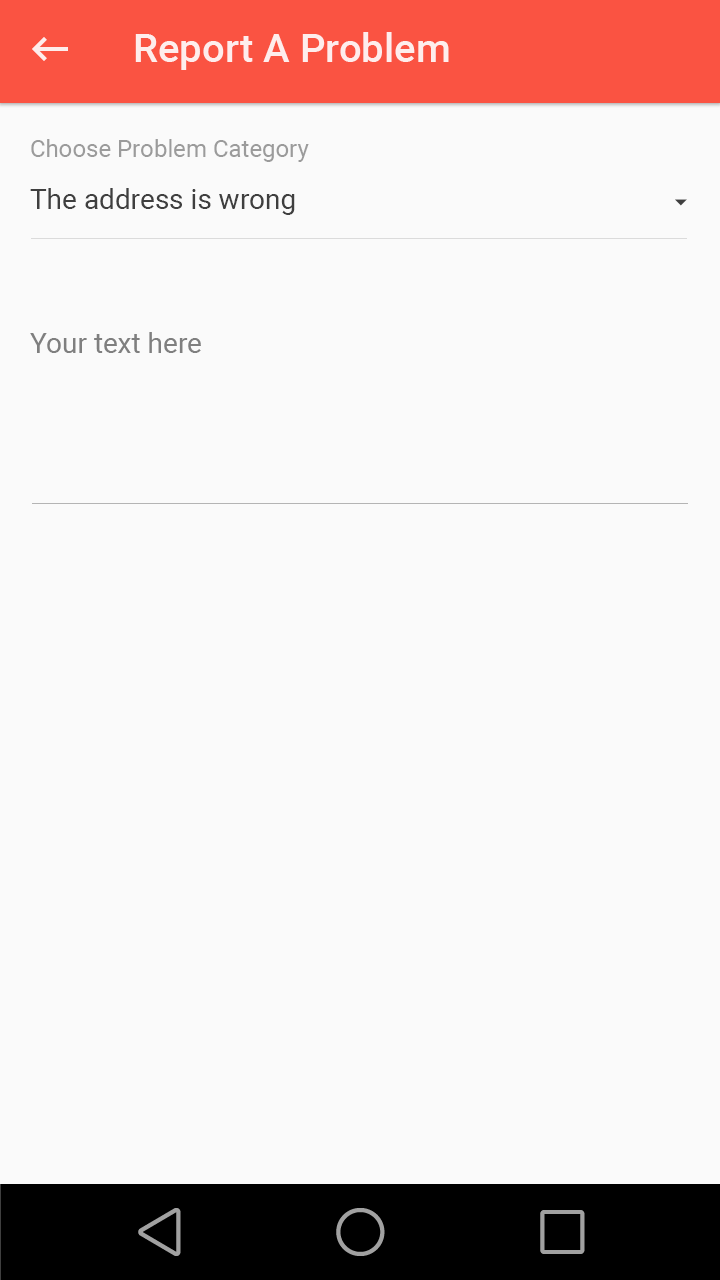
<style>
.page{position:relative;width:720px;height:1280px;background:#fafafa}
.page>*{position:absolute;margin:0}
.t1{font:40px "Roboto-Medium";color:#ffffff}
.t2{font:24px "Roboto-Regular";color:#9b9b9b}
.t3{font:28px "Roboto-Regular";color:#3f3f3f}
.t4{font:28px "Roboto-Regular";color:#7f7f7f}
</style>
<div class="page">
<p class="t1" style="left:135px;top:32px;width:314px;height:38px;opacity:0.87">Report A Problem</p>
<p class="t2" style="left:31px;top:139px;width:278px;height:23px">Choose Problem Category</p>
<p class="t3" style="left:30px;top:188px;width:265px;height:27px">The address is wrong</p>
<p class="t4" style="left:30px;top:332px;width:171px;height:21px">Your text here</p>
<p class="t4" style="left:30px;top:332px;width:171px;height:21px">Your text here</p>
</div>
